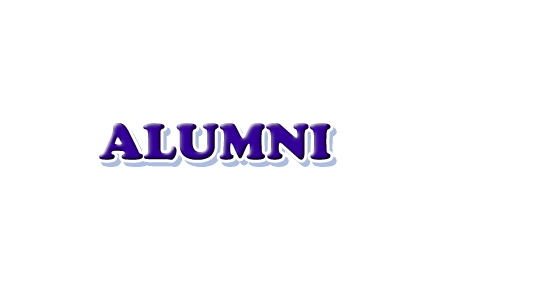
<style>
.page{position:relative;width:533px;height:297px;background:#ffffff}
.page>*{position:absolute;margin:0}
.t1{font:50px "CooperBlackStd"}
</style>
<div class="page">
<p class="t1" style="left:99px;top:123px;width:232px;height:37px">ALUMNI</p>
</div>
